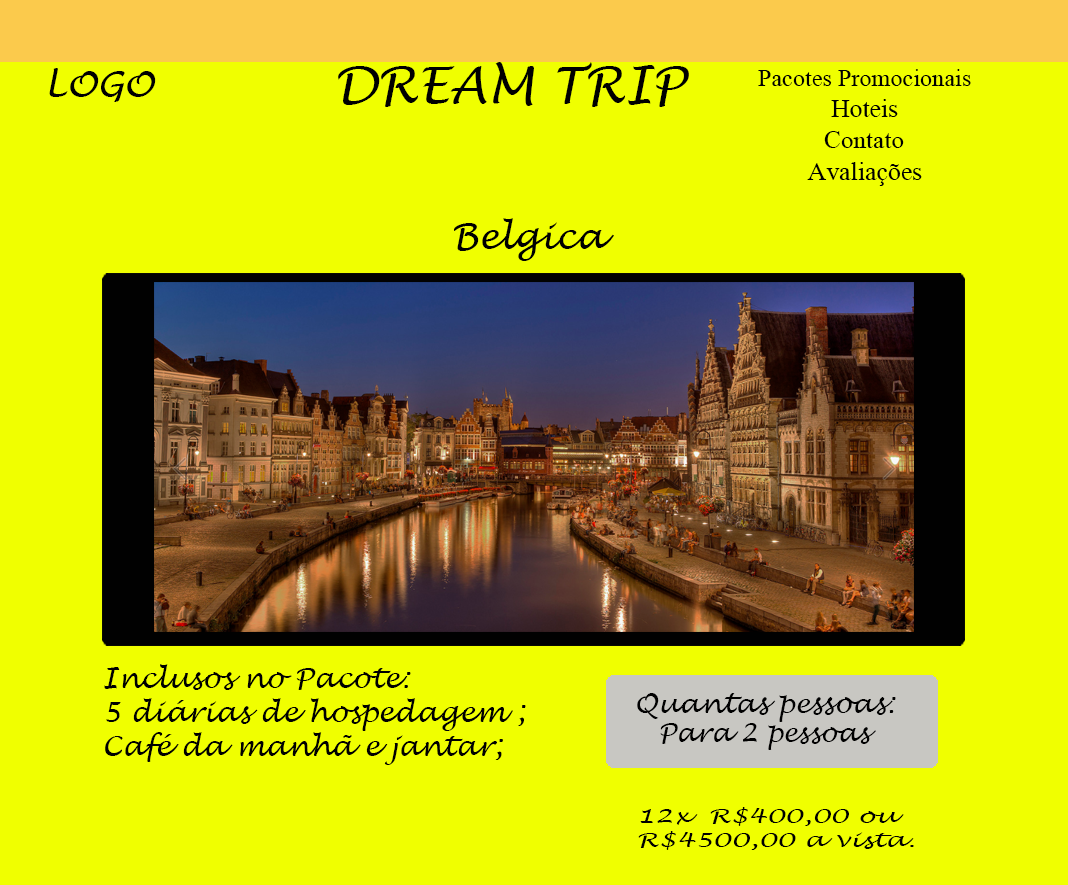
<style>
.page{position:relative;width:1068px;height:885px;background:#f0ff00}
.page>*{position:absolute;margin:0}
.t1{font:50.1px "LucidaHandwriting-Italic";color:#000000}
.t2{font:36px "LucidaHandwriting-Italic";color:#000000}
.t3{font:28.3px "LucidaHandwriting-Italic";color:#000000}
.t4{font:27.4px "LucidaHandwriting-Italic";color:#010101}
.t5{font:26px "LucidaHandwriting-Italic";color:#000000}
.t6{font:19.6px "LucidaHandwriting-Italic";color:#000000;scale:1.37 1}
</style>
<div class="page">
<p class="t1" style="left:338px;top:62px;width:351px;height:45px">DREAM TRIP</p>
<p class="t2" style="left:49px;top:68px;width:107px;height:34px">LOGO</p>
<p class="t2" style="left:454px;top:218px;width:160px;height:43px">Belgica</p>
<p class="t3" style="left:104px;top:664px;width:422px;height:101px">Inclusos no Pacote:<br>5 diárias de hospedagem ;<br>Café da manhã e jantar;</p>
<p class="t4" style="left:637px;top:693px;width:259px;height:29px">Quantas pessoas:</p>
<p class="t5" style="left:660px;top:723px;width:216px;height:27px">Para 2 pessoas</p>
<p class="t6" style="left:638px;top:807px;width:276px;height:43px">12x  R$400,00 ou<br>R$4500,00 a vista.</p>
</div>
